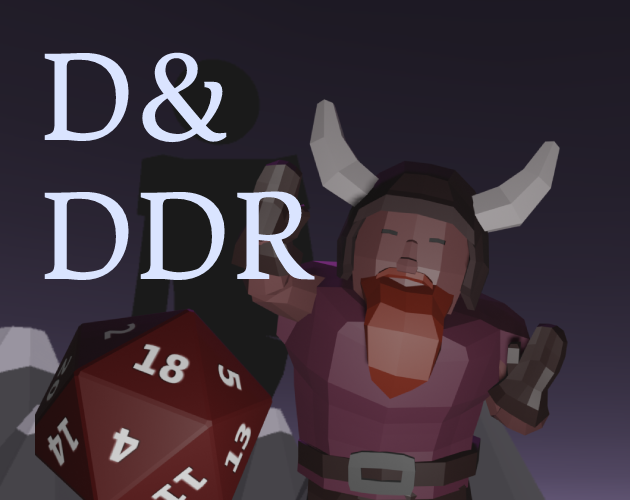
<style>
.page{position:relative;width:630px;height:500px}
.page>*{position:absolute;margin:0}
.t1{font:115.6px "DonegalOne-Regular";color:#dae4ff}
</style>
<div class="page">
<p class="t1" style="left:44px;top:52px;width:271px;height:228px">D&amp;<br>DDR</p>
</div>
